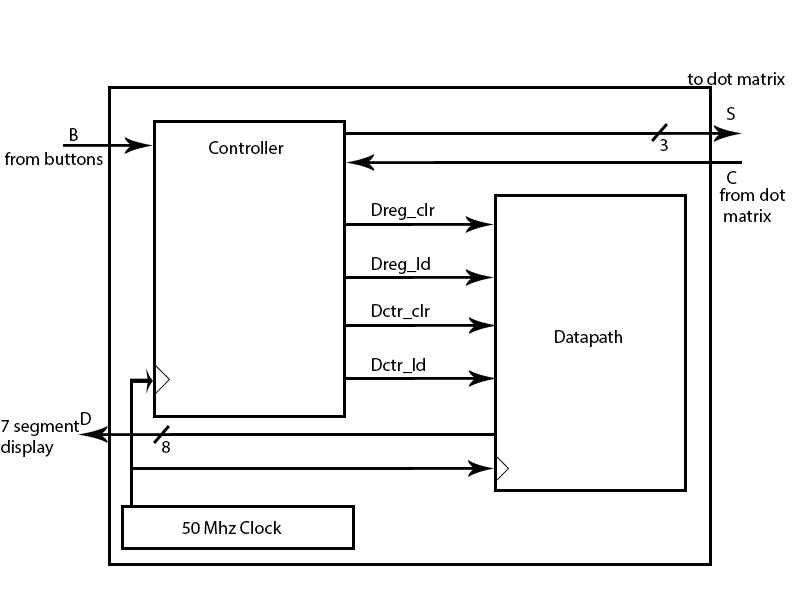
<style>
.page{position:relative;width:800px;height:600px;background:#ffffff}
.page>*{position:absolute;margin:0}
.t1{font:18px "MyriadPro-Regular";color:#000000}
</style>
<div class="page">
<p class="t1" style="left:687px;top:72px;width:98px;height:13px">to dot matrix</p>
<p class="t1" style="left:727px;top:107px;width:8px;height:13px">S</p>
<p class="t1" style="left:70px;top:128px;width:8px;height:13px">B</p>
<p class="t1" style="left:209px;top:141px;width:75px;height:13px">Controller</p>
<p class="t1" style="left:660px;top:139px;width:8px;height:12px">3</p>
<p class="t1" style="left:4px;top:152px;width:99px;height:13px">from buttons</p>
<p class="t1" style="left:727px;top:171px;width:10px;height:13px">C</p>
<p class="t1" style="left:719px;top:188px;width:67px;height:34px">from dot<br> matrix</p>
<p class="t1" style="left:372px;top:203px;width:63px;height:17px">Dreg_clr</p>
<p class="t1" style="left:372px;top:257px;width:58px;height:17px">Dreg_ld</p>
<p class="t1" style="left:372px;top:304px;width:58px;height:16px">Dctr_clr</p>
<p class="t1" style="left:555px;top:330px;width:67px;height:17px">Datapath</p>
<p class="t1" style="left:372px;top:358px;width:53px;height:16px">Dctr_ld</p>
<p class="t1" style="left:81px;top:412px;width:10px;height:13px">D</p>
<p class="t1" style="left:1px;top:420px;width:79px;height:37px">7 segment<br>display</p>
<p class="t1" style="left:162px;top:441px;width:8px;height:12px">8</p>
<p class="t1" style="left:182px;top:521px;width:100px;height:13px">50 Mhz Clock</p>
</div>
